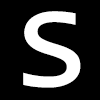
<style>
.page{position:relative;width:100px;height:100px;background:#000000}
.page>*{position:absolute;margin:0}
.t1{font:150px "Consolas";letter-spacing:0.025em;color:#ffffff}
</style>
<div class="page">
<p class="t1" style="left:23px;top:11px;width:58px;height:77px">s</p>
</div>
